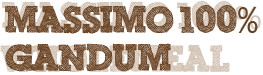
<style>
.page{position:relative;width:263px;height:75px;background:#ffffff}
.page>*{position:absolute;margin:0}
.t1{font:36px/38px "ScribbleBoxDEMO";color:#684121}
.t2{font:36px/38px "TrebuchetMS";color:#684121}
</style>
<div class="page">
<p class="t1" style="left:5px;top:4px;width:253px;height:68px">Massimo 100<span class="t2">%</span> <br>Gandum</p>
</div>
